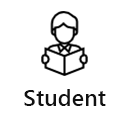
<style>
.page{position:relative;width:129px;height:124px;background:#ffffff}
.page>*{position:absolute;margin:0}
.t1{font:23.2px "YuGothicUI-Semibold";color:#111111}
</style>
<div class="page">
<p class="t1" style="left:24px;top:89px;width:82px;height:17px">Student</p>
</div>
